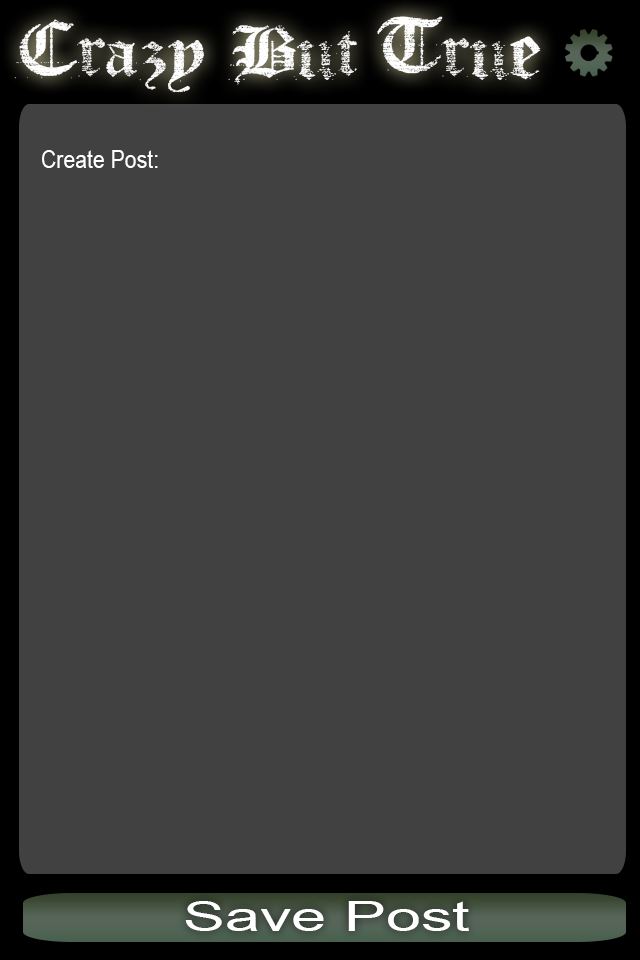
<style>
.page{position:relative;width:640px;height:960px;background:#414141}
.page>*{position:absolute;margin:0}
.t1{font:72px "Faith-Collapsing";color:#ffffff;scale:1.18 1}
.t2{font:24.7px "ArialMT";color:#ffffff;scale:0.86 1}
.t3{font:40.6px "ArialMT";color:#ffffff;scale:1.55 1}
</style>
<div class="page">
<p class="t1" style="left:14px;top:16px;width:527px;height:77px">Crazy But True</p>
<p class="t2" style="left:42px;top:150px;width:116px;height:18px">Create Post:</p>
<p class="t3" style="left:185px;top:901px;width:284px;height:30px">Save Post</p>
</div>
